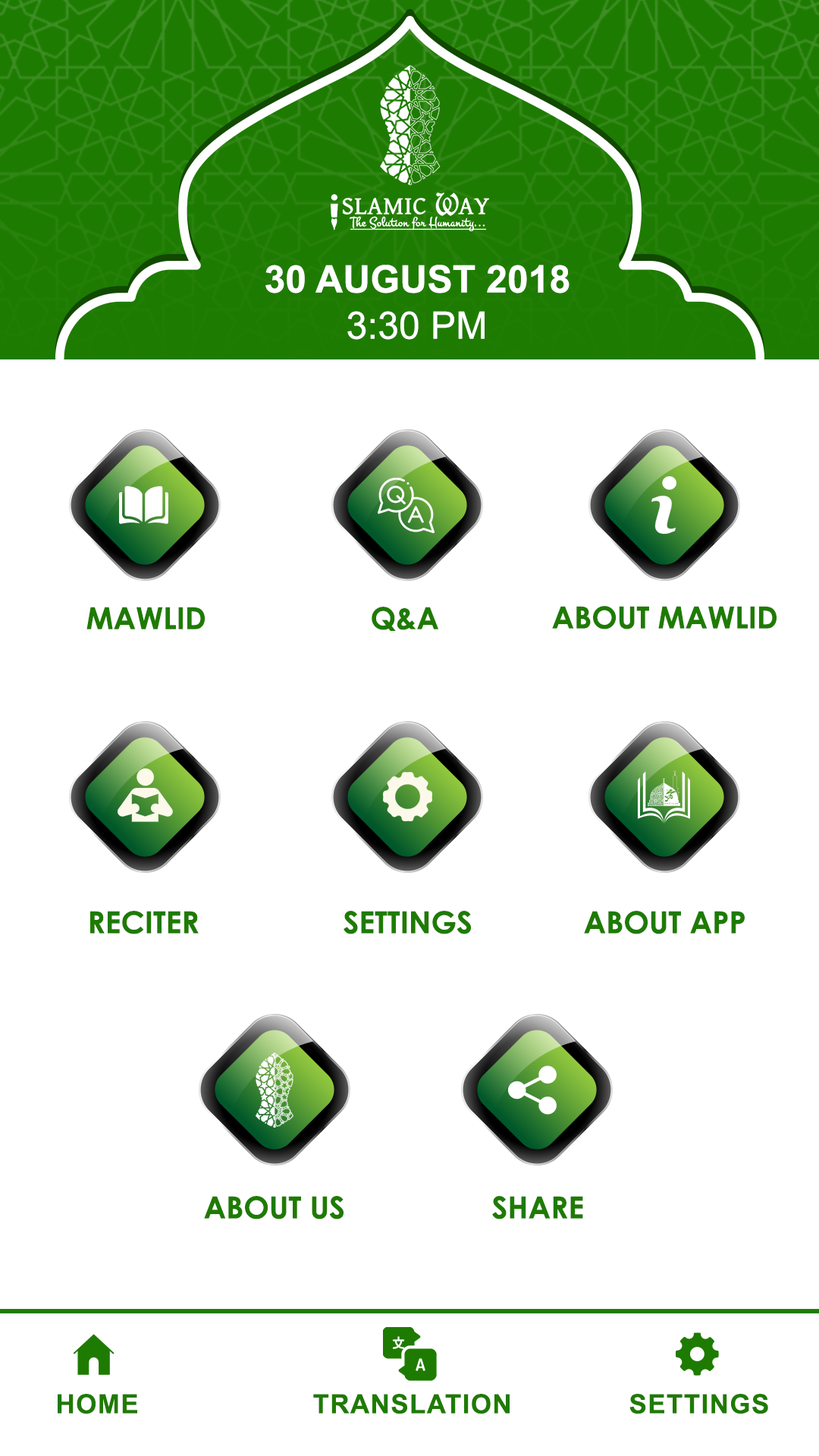
<style>
.page{position:relative;width:819px;height:1456px;background:#ffffff}
.page>*{position:absolute;margin:0}
.t1{font:37.9px "Arial-BoldMT";color:#ffffff}
.t2{font:37.9px "ArialMT";color:#ffffff}
.t3{font:30.3px "CenturyGothic-Bold";color:#1e7b01}
.t4{font:26.5px "Arial-BoldMT";letter-spacing:0.04em;color:#1e7b01}
</style>
<div class="page">
<p class="t1" style="left:265px;top:265px;width:305px;height:28px">30 AUGUST 2018</p>
<p class="t2" style="left:347px;top:311px;width:138px;height:29px">3:30 PM</p>
<p class="t3" style="left:552px;top:606px;width:225px;height:23px">ABOUT MAWLID</p>
<p class="t3" style="left:86px;top:607px;width:119px;height:22px">MAWLID</p>
<p class="t3" style="left:372px;top:607px;width:66px;height:24px">Q&amp;A</p>
<p class="t3" style="left:90px;top:911px;width:109px;height:23px">RECITER</p>
<p class="t3" style="left:344px;top:911px;width:127px;height:23px">SETTINGS</p>
<p class="t3" style="left:584px;top:911px;width:161px;height:23px">ABOUT APP</p>
<p class="t3" style="left:204px;top:1196px;width:140px;height:23px">ABOUT US</p>
<p class="t3" style="left:492px;top:1196px;width:91px;height:23px">SHARE</p>
<p class="t4" style="left:58px;top:1394px;width:79px;height:20px">HOME</p>
<p class="t4" style="left:313px;top:1394px;width:197px;height:20px">TRANSLATION</p>
<p class="t4" style="left:629px;top:1394px;width:139px;height:20px">SETTINGS</p>
</div>
